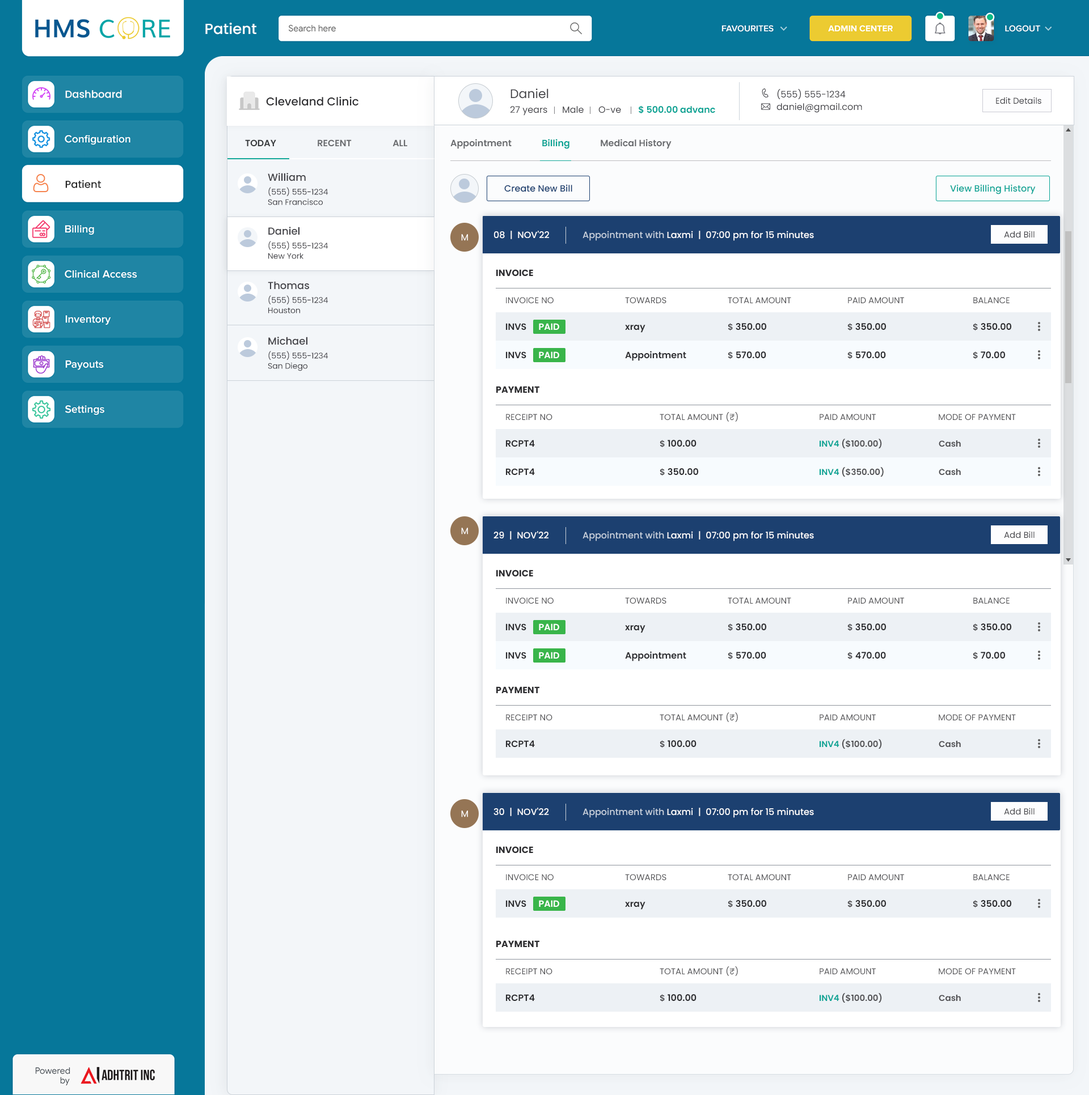
<style>
.page{position:relative;width:1089px;height:1095px;background:#ffffff}
.page>*{position:absolute;margin:0}
.t1{font:14.7px "Poppins-Medium";color:#ffffff}
.t2{font:12.5px "Poppins-Regular";color:#414146}
.t3{font:9.1px/12.5px "Poppins-Regular";color:#414146}
.t4{font:10.2px "Poppins-Medium";color:#ffffff}
.t5{font:11.3px "Poppins-Medium";color:#2c2c2f}
.t6{font:8.5px "Poppins-Regular";color:#414146}
.t7{font:9.1px "Poppins-Regular";color:#414146}
.t8{font:9.1px "Poppins-SemiBold";color:#05a394}
.t9{font:9.1px "Poppins-SemiBold";color:#696b6e;text-transform:uppercase}
.t10{font:9.1px "Poppins-SemiBold";color:#373a3d;text-transform:uppercase}
.t11{font:9.1px "Poppins-SemiBold";color:#696b6e}
.t12{font:10.2px "Poppins-Medium";color:#414146}
.t13{font:10.2px "Poppins-Medium";color:#252525}
.t14{font:9.1px "Poppins-Medium";color:#1c4070}
.t15{font:9.1px "Poppins-Medium";color:#05a394}
.t16{font:7.9px/10.2px "Poppins-Regular";color:#414146}
.t17{font:9.1px "Poppins-Medium";color:#ffffff}
.t18{font:9.1px "Poppins-Medium";color:#c4cedb}
.t19{font:9.1px "Poppins-Regular";color:#ffffff}
.t20{font:9.1px "Poppins-Bold";color:#2c2c2f;text-transform:uppercase}
.t21{font:8.5px "Poppins-Regular";color:#515154}
.t22{font:9.1px "Poppins-SemiBold";color:#2c2c2f}
.t23{font:9.1px "Poppins-SemiBold";color:#ffffff}
.t24{font:8.5px "Poppins-SemiBold";color:#515154}
.t25{font:8.5px/32.3px "Poppins-Regular";color:#515154}
.t26{font:8.5px "Poppins-SemiBold";color:#05a394}
</style>
<div class="page">
<p class="t1" style="left:205px;top:23px;width:51px;height:12px">Patient</p>
<p class="t2" style="left:510px;top:88px;width:38px;height:11px">Daniel</p>
<p class="t3" style="left:776px;top:89px;width:86px;height:24px">(555) 555-1234<br>daniel@gmail.com</p>
<p class="t4" style="left:65px;top:90px;width:57px;height:8px">Dashboard</p>
<p class="t5" style="left:266px;top:96px;width:92px;height:10px">Cleveland Clinic</p>
<p class="t6" style="left:996px;top:97px;width:45px;height:7px">Edit Details</p>
<p class="t7" style="left:510px;top:105px;width:205px;height:11px">27 years      Male      O-ve       <span class="t8">$ 500.00 advanc</span></p>
<p class="t9" style="left:245px;top:139px;width:162px;height:7px"><span class="t10">Today </span>                  Recent                   All</p>
<p class="t11" style="left:450px;top:139px;width:221px;height:10px">Appointment             <span class="t8"> Billing              </span>Medical History</p>
<p class="t12" style="left:268px;top:173px;width:38px;height:8px">William</p>
<p class="t13" style="left:65px;top:180px;width:36px;height:8px">Patient</p>
<p class="t14" style="left:504px;top:184px;width:68px;height:8px">Create New Bill</p>
<p class="t15" style="left:950px;top:184px;width:85px;height:10px">View Billing History</p>
<p class="t16" style="left:268px;top:187px;width:60px;height:18px">(555) 555-1234<br>San Francisco</p>
<p class="t12" style="left:268px;top:227px;width:31px;height:8px">Daniel</p>
<p class="t17" style="left:494px;top:231px;width:55px;height:8px">08  |  NOV'22</p>
<p class="t17" style="left:582px;top:231px;width:232px;height:10px"><span class="t18">Appointment with </span>Laxmi  |  07:00 pm for 15 minutes</p>
<p class="t6" style="left:1004px;top:231px;width:30px;height:7px">Add Bill</p>
<p class="t16" style="left:268px;top:241px;width:60px;height:18px">(555) 555-1234<br>New York</p>
<p class="t19" style="left:461px;top:234px;width:7px;height:7px">M</p>
<p class="t20" style="left:496px;top:269px;width:37px;height:7px">Invoice</p>
<p class="t12" style="left:268px;top:281px;width:41px;height:9px">Thomas</p>
<p class="t16" style="left:268px;top:295px;width:60px;height:19px">(555) 555-1234<br>Houston</p>
<p class="t21" style="left:506px;top:297px;width:47px;height:6px">INVOICE NO</p>
<p class="t21" style="left:625px;top:297px;width:41px;height:6px">TOWARDS</p>
<p class="t21" style="left:727px;top:297px;width:64px;height:6px">TOTAL AMOUNT</p>
<p class="t21" style="left:848px;top:297px;width:56px;height:6px">PAID AMOUNT</p>
<p class="t21" style="left:973px;top:297px;width:36px;height:6px">BALANCE</p>
<p class="t22" style="left:506px;top:323px;width:20px;height:7px">INVS</p>
<p class="t23" style="left:539px;top:323px;width:20px;height:7px">PAID</p>
<p class="t22" style="left:625px;top:325px;width:20px;height:8px">xray</p>
<p class="t22" style="left:727px;top:323px;width:39px;height:8px"><span class="t24">$ </span>350.00</p>
<p class="t22" style="left:847px;top:323px;width:39px;height:8px"><span class="t24">$ </span>350.00</p>
<p class="t22" style="left:972px;top:323px;width:39px;height:8px"><span class="t24">$ </span>350.00</p>
<p class="t12" style="left:268px;top:337px;width:39px;height:8px">Michael</p>
<p class="t16" style="left:268px;top:351px;width:60px;height:20px">(555) 555-1234<br>San Diego</p>
<p class="t22" style="left:506px;top:352px;width:20px;height:6px">INVS</p>
<p class="t23" style="left:539px;top:352px;width:20px;height:6px">PAID</p>
<p class="t22" style="left:625px;top:351px;width:61px;height:10px">Appointment</p>
<p class="t22" style="left:727px;top:352px;width:39px;height:7px"><span class="t24">$ </span>570.00</p>
<p class="t22" style="left:847px;top:352px;width:39px;height:7px"><span class="t24">$ </span>570.00</p>
<p class="t22" style="left:972px;top:352px;width:33px;height:7px"><span class="t24">$ </span>70.00</p>
<p class="t20" style="left:496px;top:386px;width:43px;height:7px">Payment</p>
<p class="t21" style="left:506px;top:414px;width:46px;height:6px">RECEIPT NO</p>
<p class="t25" style="left:659px;top:412px;width:79px;height:40px">TOTAL AMOUNT (₹)<br>v</p>
<p class="t21" style="left:819px;top:414px;width:56px;height:6px">PAID AMOUNT</p>
<p class="t21" style="left:938px;top:414px;width:77px;height:6px">MODE OF PAYMENT</p>
<p class="t22" style="left:506px;top:440px;width:29px;height:7px">RCPT4</p>
<p class="t22" style="left:659px;top:440px;width:37px;height:8px"><span class="t24">$ </span>100.00</p>
<p class="t24" style="left:819px;top:439px;width:63px;height:9px"><span class="t26">INV4 </span>($100.00)</p>
<p class="t24" style="left:938px;top:441px;width:22px;height:6px">Cash</p>
<p class="t22" style="left:506px;top:468px;width:29px;height:7px">RCPT4</p>
<p class="t22" style="left:659px;top:468px;width:39px;height:8px"><span class="t24">$ </span>350.00</p>
<p class="t24" style="left:819px;top:467px;width:64px;height:10px"><span class="t26">INV4 </span>($350.00)</p>
<p class="t24" style="left:938px;top:469px;width:22px;height:7px">Cash</p>
<p class="t19" style="left:461px;top:528px;width:7px;height:7px">M</p>
<p class="t17" style="left:493px;top:531px;width:55px;height:9px">29  |  NOV'22</p>
<p class="t17" style="left:582px;top:531px;width:232px;height:10px"><span class="t18">Appointment with </span>Laxmi  |  07:00 pm for 15 minutes</p>
<p class="t6" style="left:1004px;top:531px;width:30px;height:8px">Add Bill</p>
<p class="t20" style="left:496px;top:570px;width:37px;height:7px">Invoice</p>
<p class="t21" style="left:506px;top:598px;width:47px;height:6px">INVOICE NO</p>
<p class="t21" style="left:625px;top:598px;width:41px;height:6px">TOWARDS</p>
<p class="t21" style="left:727px;top:598px;width:64px;height:6px">TOTAL AMOUNT</p>
<p class="t21" style="left:848px;top:598px;width:56px;height:6px">PAID AMOUNT</p>
<p class="t21" style="left:973px;top:598px;width:36px;height:6px">BALANCE</p>
<p class="t22" style="left:506px;top:624px;width:20px;height:6px">INVS</p>
<p class="t23" style="left:539px;top:624px;width:20px;height:6px">PAID</p>
<p class="t22" style="left:625px;top:625px;width:20px;height:8px">xray</p>
<p class="t22" style="left:727px;top:624px;width:39px;height:8px"><span class="t24">$ </span>350.00</p>
<p class="t22" style="left:847px;top:624px;width:39px;height:8px"><span class="t24">$ </span>350.00</p>
<p class="t22" style="left:972px;top:624px;width:39px;height:8px"><span class="t24">$ </span>350.00</p>
<p class="t22" style="left:506px;top:652px;width:20px;height:7px">INVS</p>
<p class="t23" style="left:539px;top:652px;width:20px;height:7px">PAID</p>
<p class="t22" style="left:625px;top:651px;width:61px;height:11px">Appointment</p>
<p class="t22" style="left:727px;top:652px;width:39px;height:8px"><span class="t24">$ </span>570.00</p>
<p class="t22" style="left:847px;top:652px;width:39px;height:8px"><span class="t24">$ </span>470.00</p>
<p class="t22" style="left:972px;top:652px;width:33px;height:8px"><span class="t24">$ </span>70.00</p>
<p class="t20" style="left:496px;top:687px;width:43px;height:6px">Payment</p>
<p class="t25" style="left:659px;top:713px;width:79px;height:40px">TOTAL AMOUNT (₹)<br>v</p>
<p class="t21" style="left:506px;top:714px;width:46px;height:7px">RECEIPT NO</p>
<p class="t21" style="left:819px;top:714px;width:56px;height:7px">PAID AMOUNT</p>
<p class="t21" style="left:938px;top:714px;width:77px;height:7px">MODE OF PAYMENT</p>
<p class="t22" style="left:506px;top:740px;width:29px;height:7px">RCPT4</p>
<p class="t22" style="left:659px;top:740px;width:37px;height:8px"><span class="t24">$ </span>100.00</p>
<p class="t24" style="left:819px;top:739px;width:63px;height:10px"><span class="t26">INV4 </span>($100.00)</p>
<p class="t24" style="left:938px;top:741px;width:22px;height:7px">Cash</p>
<p class="t17" style="left:493px;top:808px;width:56px;height:8px">30  |  NOV'22</p>
<p class="t17" style="left:582px;top:808px;width:232px;height:10px"><span class="t18">Appointment with </span>Laxmi  |  07:00 pm for 15 minutes</p>
<p class="t6" style="left:1004px;top:808px;width:30px;height:7px">Add Bill</p>
<p class="t19" style="left:461px;top:811px;width:7px;height:7px">M</p>
<p class="t20" style="left:496px;top:846px;width:37px;height:7px">Invoice</p>
<p class="t21" style="left:506px;top:874px;width:47px;height:7px">INVOICE NO</p>
<p class="t21" style="left:625px;top:874px;width:41px;height:7px">TOWARDS</p>
<p class="t21" style="left:727px;top:874px;width:64px;height:7px">TOTAL AMOUNT</p>
<p class="t21" style="left:848px;top:874px;width:56px;height:7px">PAID AMOUNT</p>
<p class="t21" style="left:973px;top:874px;width:36px;height:7px">BALANCE</p>
<p class="t22" style="left:506px;top:900px;width:20px;height:7px">INVS</p>
<p class="t23" style="left:539px;top:900px;width:20px;height:7px">PAID</p>
<p class="t22" style="left:625px;top:902px;width:20px;height:8px">xray</p>
<p class="t22" style="left:727px;top:900px;width:39px;height:8px"><span class="t24">$ </span>350.00</p>
<p class="t22" style="left:847px;top:900px;width:39px;height:8px"><span class="t24">$ </span>350.00</p>
<p class="t22" style="left:972px;top:900px;width:39px;height:8px"><span class="t24">$ </span>350.00</p>
<p class="t20" style="left:496px;top:941px;width:43px;height:6px">Payment</p>
<p class="t21" style="left:506px;top:968px;width:46px;height:7px">RECEIPT NO</p>
<p class="t25" style="left:659px;top:967px;width:79px;height:40px">TOTAL AMOUNT (₹)<br>v</p>
<p class="t21" style="left:819px;top:968px;width:56px;height:7px">PAID AMOUNT</p>
<p class="t21" style="left:938px;top:968px;width:77px;height:7px">MODE OF PAYMENT</p>
<p class="t22" style="left:506px;top:994px;width:29px;height:7px">RCPT4</p>
<p class="t22" style="left:659px;top:994px;width:37px;height:8px"><span class="t24">$ </span>100.00</p>
<p class="t24" style="left:819px;top:993px;width:63px;height:10px"><span class="t26">INV4 </span>($100.00)</p>
<p class="t24" style="left:938px;top:995px;width:22px;height:7px">Cash</p>
</div>
